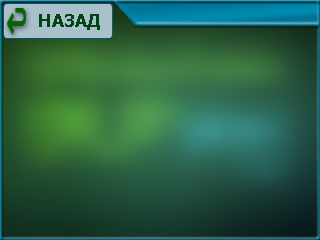
<style>
.page{position:relative;width:320px;height:240px}
.page>*{position:absolute;margin:0}
.t1{font:18px "Tahoma-Bold";color:#004612}
</style>
<div class="page">
<p class="t1" style="left:39px;top:14px;width:61px;height:16px">НАЗАД</p>
</div>
